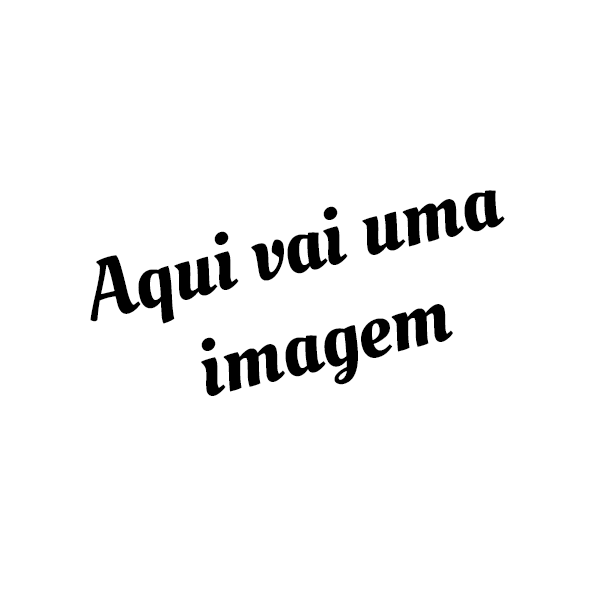
<style>
.page{position:relative;width:600px;height:600px;background:#ffffff}
.page>*{position:absolute;margin:0}
.t1{font:83.3px "OleoScript-Regular";color:#000000}
</style>
<div class="page">
<p class="t1" style="left:90px;top:190px;width:415px;height:206px;text-align:center;rotate:-13deg">Aqui vai uma <br>imagem</p>
</div>
